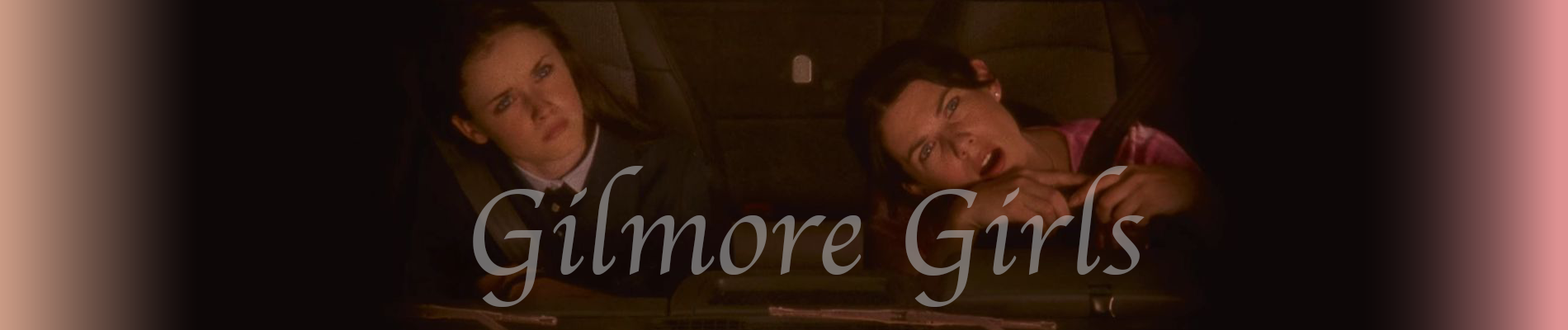
<style>
.page{position:relative;width:1568px;height:330px;background:#0d0707}
.page>*{position:absolute;margin:0}
.t1{font:123.8px "Apple-Chancery";color:#746e6b}
</style>
<div class="page">
<p class="t1" style="left:473px;top:166px;width:672px;height:141px">Gilmore Girls</p>
</div>
